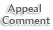
<style>
.page{position:relative;width:53px;height:30px;background:#ffffff}
.page>*{position:absolute;margin:0}
.t1{font:11px/12px "AmiraParadiso";color:#646464}
</style>
<div class="page">
<p class="t1" style="left:2px;top:4px;width:49px;height:20px;text-align:center">Appeal <br>Comment</p>
</div>
